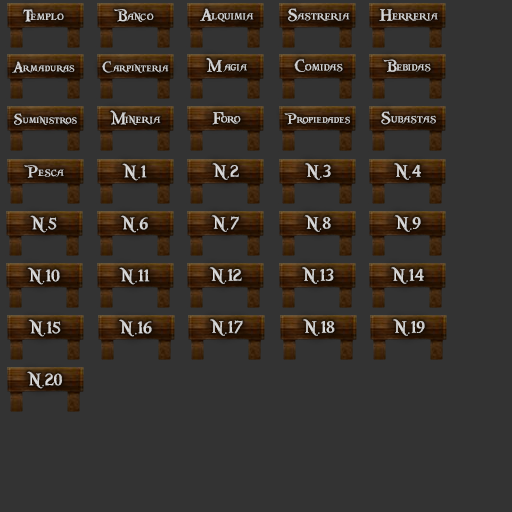
<style>
.page{position:relative;width:512px;height:512px;background:#333333}
.page>*{position:absolute;margin:0}
.t1{font:18px "PiecesofEight";color:#d3d3d3}
.t2{font:18px "PiecesofEight";color:#d6d6d6}
.t3{font:18px "PiecesofEight";color:#d2d2d2}
.t4{font:16px "PiecesofEight";color:#d1d1d1}
.t5{font:16px "PiecesofEight";color:#cfcfcf}
.t6{font:18px "PiecesofEight";color:#d1d1d1}
.t7{font:18px "PiecesofEight";color:#d0d0d0}
.t8{font:18px "PiecesofEight";color:#d4d4d4}
.t9{font:16px "PiecesofEight";color:#d2d2d2}
.t10{font:18px "PiecesofEight";color:#cecece}
.t11{font:18px "PiecesofEight";color:#cfcfcf}
.t12{font:18px "PiecesofEight";color:#d5d5d5}
</style>
<div class="page">
<p class="t1" style="left:23px;top:9px;width:41px;height:13px">Templo</p>
<p class="t2" style="left:114px;top:9px;width:40px;height:13px">Banco</p>
<p class="t3" style="left:200px;top:8px;width:54px;height:14px">Alquimia</p>
<p class="t3" style="left:288px;top:8px;width:62px;height:14px">Sastreria</p>
<p class="t1" style="left:379px;top:9px;width:59px;height:12px">Herreria</p>
<p class="t4" style="left:12px;top:61px;width:63px;height:12px">Armaduras</p>
<p class="t5" style="left:102px;top:61px;width:67px;height:12px">Carpinteria</p>
<p class="t6" style="left:206px;top:58px;width:41px;height:14px">Magia</p>
<p class="t7" style="left:294px;top:59px;width:49px;height:13px">Comidas</p>
<p class="t8" style="left:383px;top:59px;width:48px;height:13px">Bebidas</p>
<p class="t4" style="left:14px;top:113px;width:63px;height:12px">Suministros</p>
<p class="t8" style="left:110px;top:110px;width:51px;height:15px">Mineria</p>
<p class="t1" style="left:212px;top:112px;width:29px;height:13px">Foro</p>
<p class="t9" style="left:284px;top:113px;width:66px;height:12px">Propiedades</p>
<p class="t3" style="left:381px;top:111px;width:55px;height:14px">Subastas</p>
<p class="t6" style="left:24px;top:165px;width:40px;height:13px">Pesca</p>
<p class="t10" style="left:122px;top:163px;width:25px;height:18px">Nº.1</p>
<p class="t1" style="left:212px;top:163px;width:27px;height:17px">N.2</p>
<p class="t10" style="left:305px;top:163px;width:26px;height:17px">N.3</p>
<p class="t7" style="left:394px;top:163px;width:27px;height:17px">N.4</p>
<p class="t7" style="left:30px;top:215px;width:27px;height:18px">N.5</p>
<p class="t1" style="left:121px;top:215px;width:27px;height:18px">Nº.6</p>
<p class="t7" style="left:211px;top:215px;width:28px;height:17px">N.7</p>
<p class="t3" style="left:304px;top:215px;width:27px;height:17px">N.8</p>
<p class="t1" style="left:394px;top:215px;width:27px;height:17px">N.9</p>
<p class="t1" style="left:27px;top:267px;width:33px;height:18px">N.10</p>
<p class="t11" style="left:119px;top:267px;width:31px;height:18px">Nº.11</p>
<p class="t8" style="left:209px;top:267px;width:33px;height:17px">N.12</p>
<p class="t7" style="left:302px;top:267px;width:32px;height:17px">N.13</p>
<p class="t3" style="left:391px;top:267px;width:33px;height:17px">N.14</p>
<p class="t6" style="left:28px;top:319px;width:33px;height:18px">N.15</p>
<p class="t1" style="left:119px;top:319px;width:33px;height:18px">Nº.16</p>
<p class="t7" style="left:210px;top:319px;width:33px;height:17px">N.17</p>
<p class="t3" style="left:303px;top:319px;width:32px;height:17px">N.18</p>
<p class="t1" style="left:393px;top:319px;width:32px;height:17px">N.19</p>
<p class="t12" style="left:27px;top:371px;width:35px;height:18px">N.20</p>
</div>
